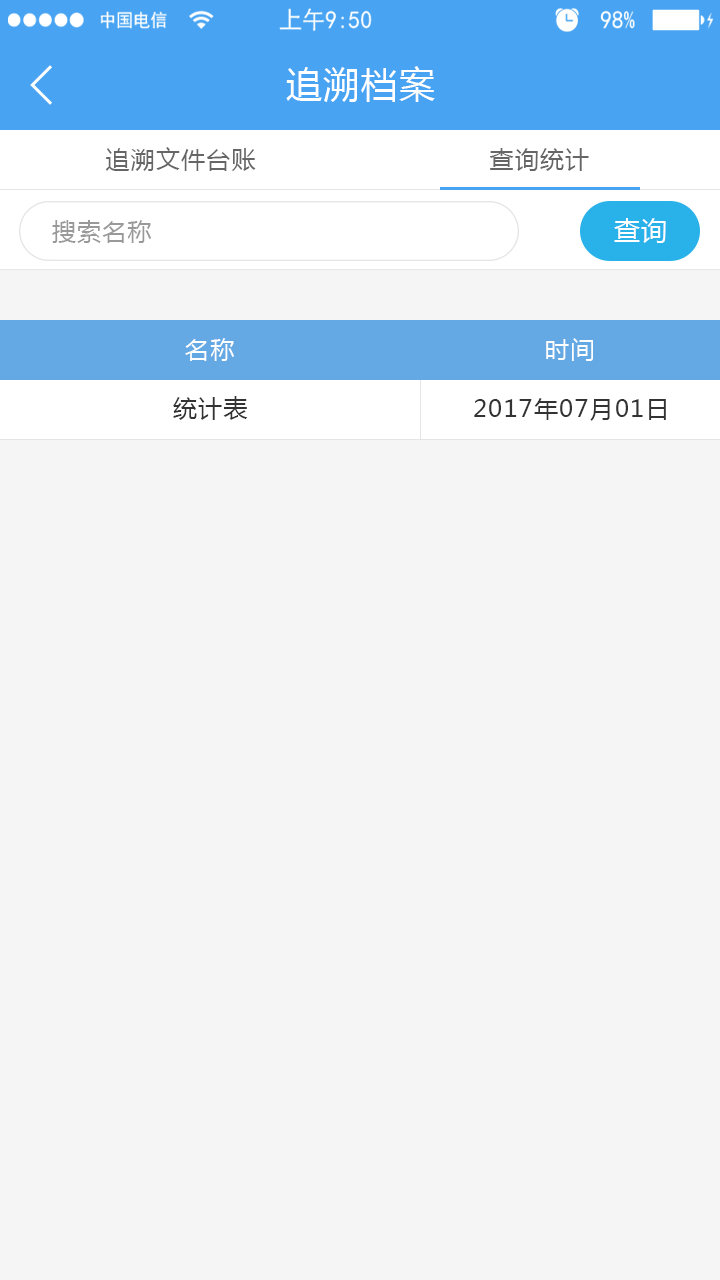
<style>
.page{position:relative;width:720px;height:1280px;background:#f5f5f5}
.page>*{position:absolute;margin:0}
.t1{font:36px "MicrosoftYaHei";letter-spacing:0.05em;color:#ffffff}
.t2{font:24px "MicrosoftYaHei";letter-spacing:0.05em;color:#666666}
.t3{font:24px "MicrosoftYaHei";letter-spacing:0.05em;color:#999999}
.t4{font:26px "MicrosoftYaHei";letter-spacing:0.05em;color:#ffffff}
.t5{font:24px "MicrosoftYaHei";letter-spacing:0.05em;color:#ffffff}
.t6{font:24px "MicrosoftYaHei";letter-spacing:0.05em;color:#333333}
</style>
<div class="page">
<p class="t1" style="left:286px;top:66px;width:149px;height:36px">追溯档案</p>
<p class="t2" style="left:106px;top:147px;width:150px;height:24px">追溯文件台账</p>
<p class="t2" style="left:489px;top:148px;width:100px;height:23px">查询统计</p>
<p class="t3" style="left:52px;top:220px;width:99px;height:23px">搜索名称</p>
<p class="t4" style="left:614px;top:218px;width:52px;height:25px">查询</p>
<p class="t5" style="left:185px;top:338px;width:49px;height:23px">名称</p>
<p class="t5" style="left:546px;top:338px;width:47px;height:23px">时间</p>
<p class="t6" style="left:173px;top:396px;width:75px;height:24px">统计表</p>
<p class="t6" style="left:474px;top:398px;width:192px;height:23px">2017年07月01日</p>
</div>
